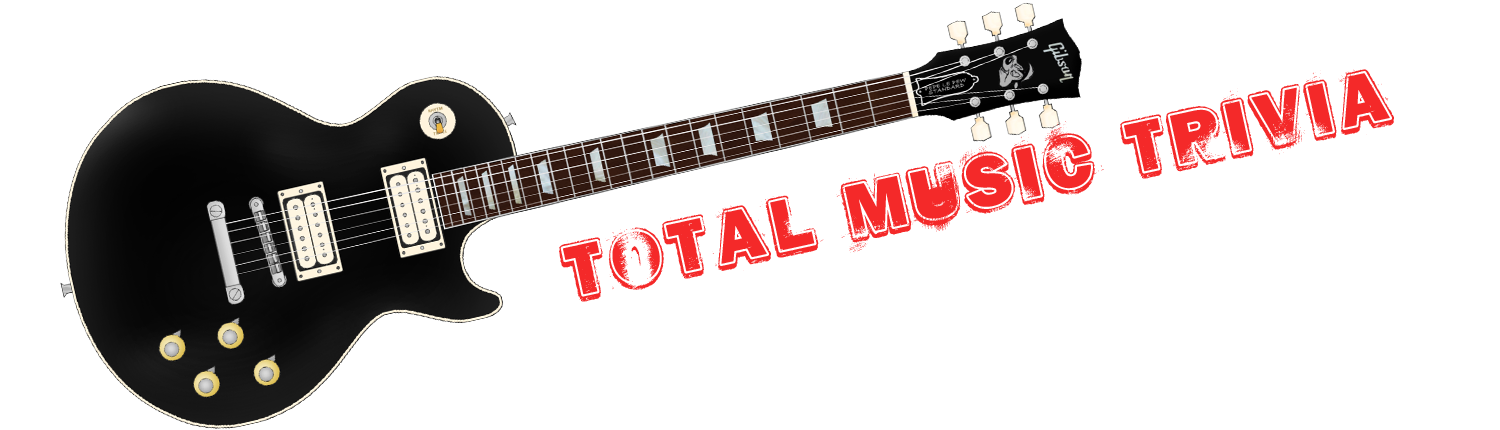
<style>
.page{position:relative;width:1500px;height:430px;background:#ffffff}
.page>*{position:absolute;margin:0}
.t1{font:89.9px "HARDROCK";letter-spacing:0.04em;color:#f42929;text-transform:uppercase}
</style>
<div class="page">
<p class="t1" style="left:559px;top:69px;width:835px;height:233px;rotate:-12deg">total music trivia</p>
</div>
